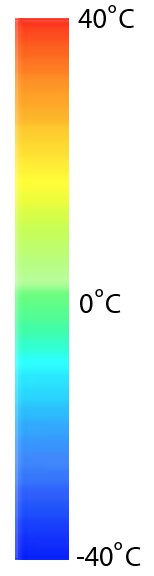
<style>
.page{position:relative;width:154px;height:576px;background:#ffffff}
.page>*{position:absolute;margin:0}
.t1{font:16px "MyriadPro-Regular";color:#000000}
.t2{font:28px "MyriadPro-Regular";color:#000000}
</style>
<div class="page">
<p class="t1" style="left:108px;top:5px;width:8px;height:8px">o</p>
<p class="t2" style="left:78px;top:9px;width:56px;height:19px">40  C</p>
<p class="t2" style="left:80px;top:294px;width:41px;height:19px">0  C</p>
<p class="t1" style="left:95px;top:289px;width:8px;height:8px">o</p>
<p class="t1" style="left:114px;top:542px;width:8px;height:8px">o</p>
<p class="t2" style="left:77px;top:547px;width:64px;height:19px">-40  C</p>
</div>
